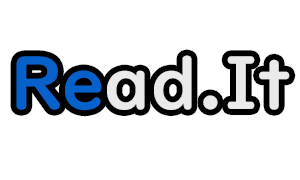
<style>
.page{position:relative;width:300px;height:180px;background:#ffffff}
.page>*{position:absolute;margin:0}
.t1{font:72px "UDDigiKyokashoNP-B";color:#eaeaea}
.t2{font:72px "UDDigiKyokashoNP-B";color:#0662ca}
</style>
<div class="page">
<p class="t1" style="left:16px;top:55px;width:274px;height:56px"><span class="t2">Re</span>ad.It</p>
</div>
